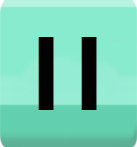
<style>
.page{position:relative;width:137px;height:147px;background:#89ebce}
.page>*{position:absolute;margin:0}
.t1{font:58.3px "FFFForward";color:#020202}
</style>
<div class="page">
<p class="t1" style="left:38px;top:37px;width:59px;height:73px">I I</p>
</div>
